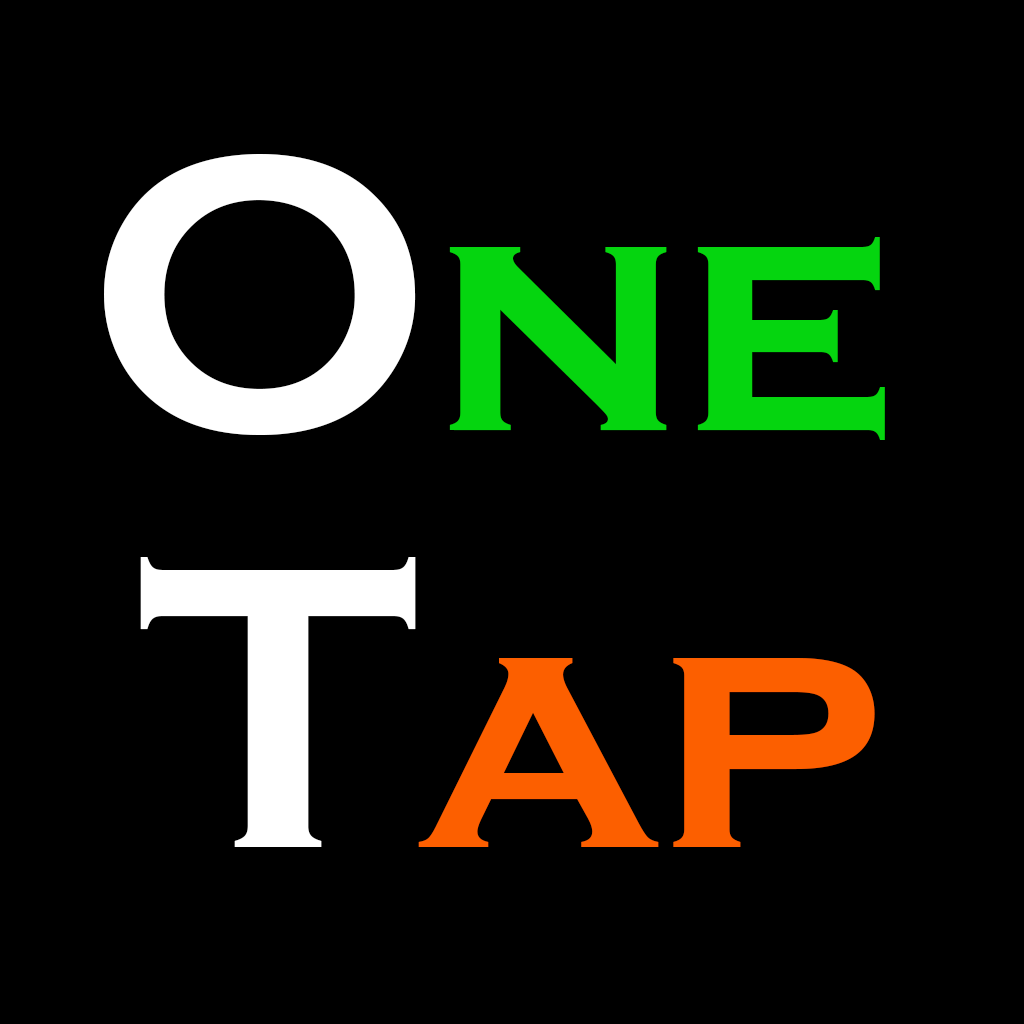
<style>
.page{position:relative;width:1024px;height:1024px;background:#000000}
.page>*{position:absolute;margin:0}
.t1{font:333.6px "CopperplateGothic-Bold";color:#05d50f}
.t2{font:406px "CopperplateGothic-Bold";color:#ffffff}
.t3{font:345.3px "CopperplateGothic-Bold";color:#fc5f00}
.t4{font:415.4px "CopperplateGothic-Bold";color:#ffffff}
</style>
<div class="page">
<p class="t1" style="left:104px;top:154px;width:781px;height:286px"><span class="t2">O</span>ne</p>
<p class="t3" style="left:140px;top:557px;width:735px;height:290px"><span class="t4">T</span>ap</p>
</div>
